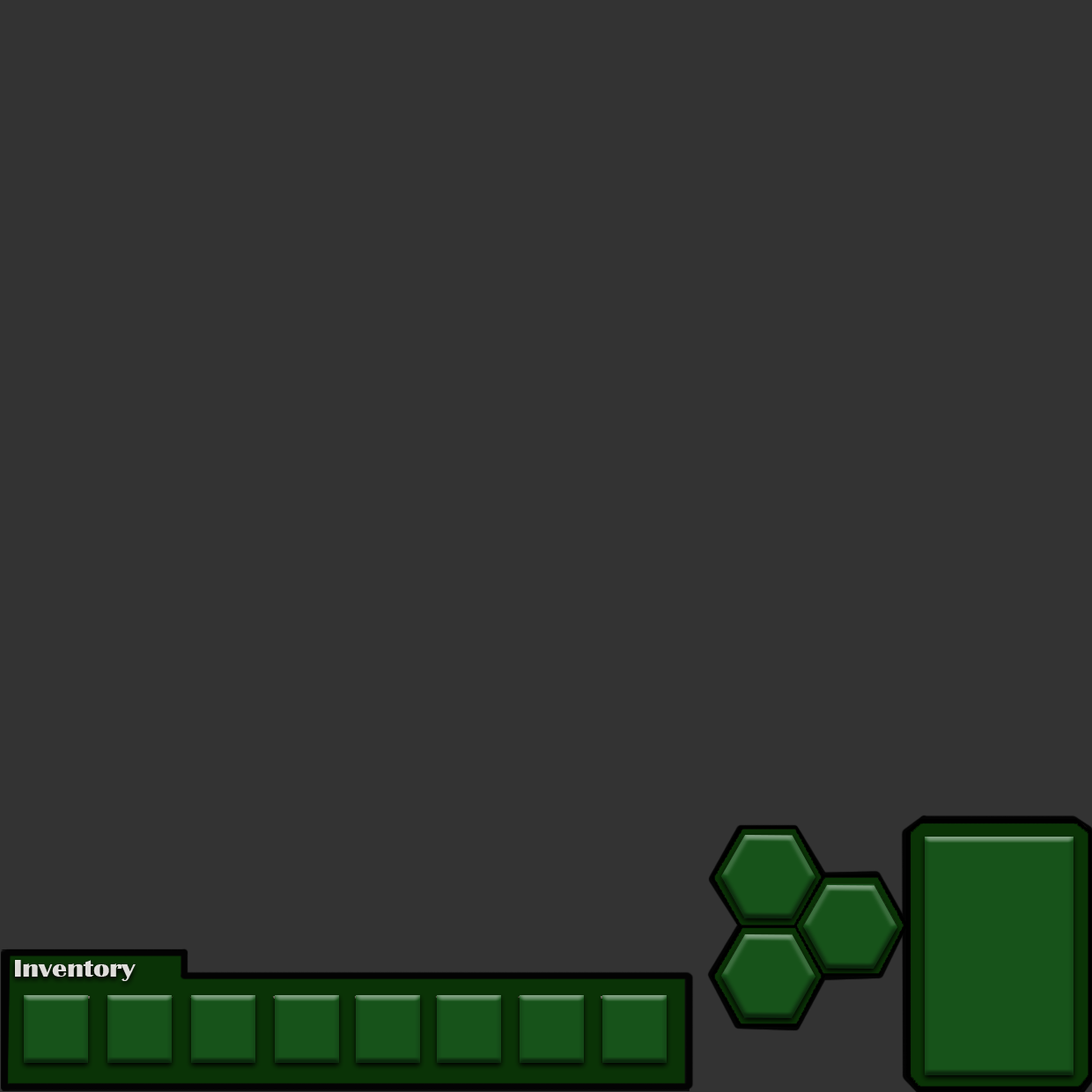
<style>
.page{position:relative;width:1092px;height:1092px;background:#333333}
.page>*{position:absolute;margin:0}
.t1{font:24.7px "BritannicBold";color:#d3d1cd;scale:1.2 1}
</style>
<div class="page">
<p class="t1" style="left:15px;top:960px;width:121px;height:21px">Inventory</p>
</div>
